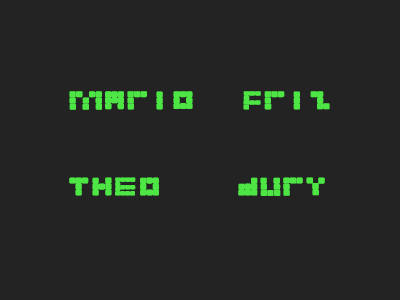
<style>
.page{position:relative;width:400px;height:300px;background:#232323}
.page>*{position:absolute;margin:0}
.t1{font:36px "NEWTETRIS";letter-spacing:0.008em;color:#4de645;scale:0.92 1}
</style>
<div class="page">
<p class="t1" style="left:69px;top:91px;width:261px;height:120px">Mario     Friz<br><br>tHEO        dury</p>
</div>
